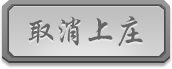
<style>
.page{position:relative;width:172px;height:69px}
.page>*{position:absolute;margin:0}
.t1{font:32px "CloudKaiXingGBK";letter-spacing:-0.06em;color:#656565}
</style>
<div class="page">
<p class="t1" style="left:28px;top:16px;width:115px;height:31px">取消上庄</p>
</div>
